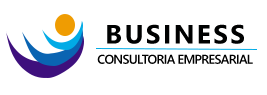
<style>
.page{position:relative;width:267px;height:95px;background:#ffffff}
.page>*{position:absolute;margin:0}
.t1{font:26.4px "SegoeUI-Bold";letter-spacing:0.09em;color:#000101}
.t2{font:12.7px "SegoeUI-Semibold";letter-spacing:-0.05em;color:#000000}
</style>
<div class="page">
<p class="t1" style="left:107px;top:24px;width:137px;height:20px">BUSINESS</p>
<p class="t2" style="left:97px;top:54px;width:156px;height:10px">CONSULTORIA EMPRESARIAL</p>
</div>
